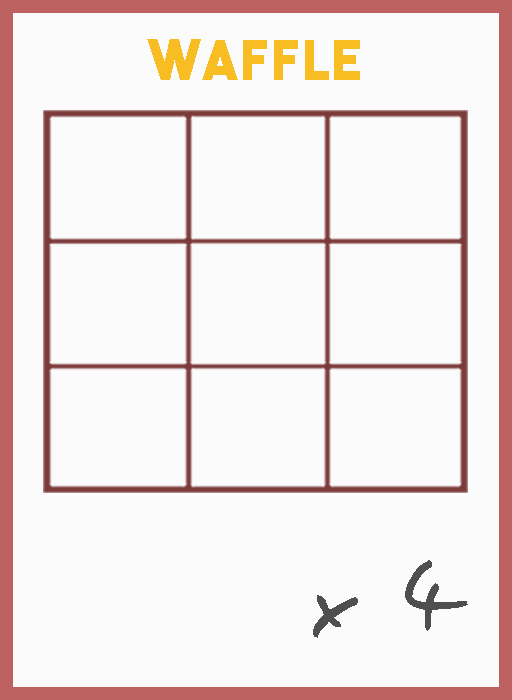
<style>
.page{position:relative;width:512px;height:700px;background:#fbfbfb}
.page>*{position:absolute;margin:0}
.t1{font:54.5px "TheBoldFont";letter-spacing:0.05em;color:#f7bd22}
.t2{font:106.1px "EasySpeech";letter-spacing:0.05em;color:#4f4f4f}
</style>
<div class="page">
<p class="t1" style="left:147px;top:39px;width:213px;height:41px">Waffle</p>
<p class="t2" style="left:313px;top:560px;width:155px;height:78px">x 4</p>
</div>
